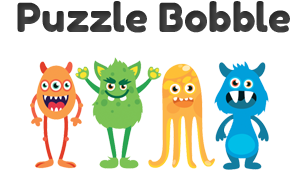
<style>
.page{position:relative;width:300px;height:170px;background:#ffffff}
.page>*{position:absolute;margin:0}
.t1{font:40px "FredokaOne-Regular";color:#444444}
</style>
<div class="page">
<p class="t1" style="left:17px;top:1px;width:273px;height:32px">Puzzle Bobble</p>
</div>
